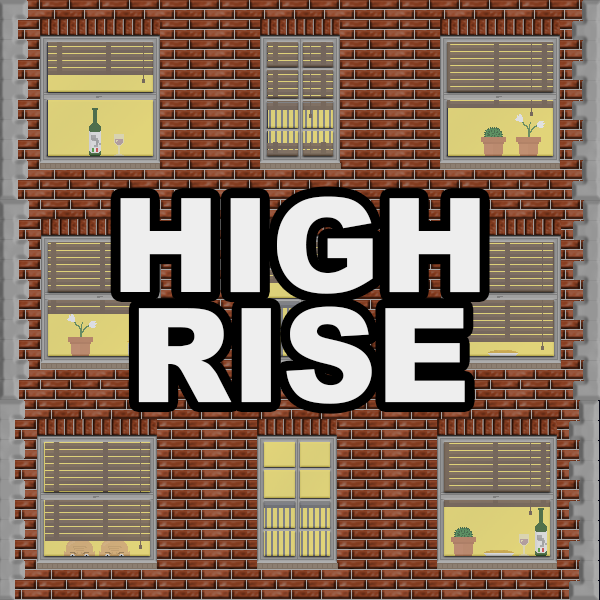
<style>
.page{position:relative;width:600px;height:600px}
.page>*{position:absolute;margin:0}
.t1{font:130.7px/110px "Arial-Black";color:#eeeeee}
</style>
<div class="page">
<p class="t1" style="left:120px;top:196px;width:360px;height:208px;text-align:center">HIGH<br>RISE</p>
</div>
